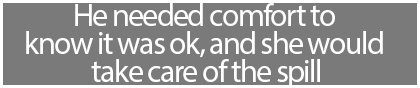
<style>
.page{position:relative;width:420px;height:88px;background:#7a7a7a}
.page>*{position:absolute;margin:0}
.t1{font:32px/28px "MyriadPro-Regular";letter-spacing:-0.05em;color:#ffffff}
</style>
<div class="page">
<p class="t1" style="left:26px;top:3px;width:357px;height:85px;text-align:center">He needed comfort to <br>know it was ok, and she would <br>take care of the spill</p>
</div>
